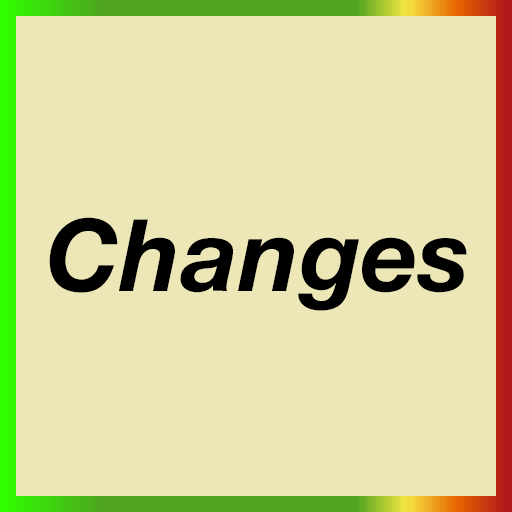
<style>
.page{position:relative;width:512px;height:512px;background:#ede7b8}
.page>*{position:absolute;margin:0}
.t1{font:100px "HelveticaNeue-BoldItalic";color:#000000}
</style>
<div class="page">
<p class="t1" style="left:49px;top:217px;width:418px;height:94px">Changes</p>
</div>
